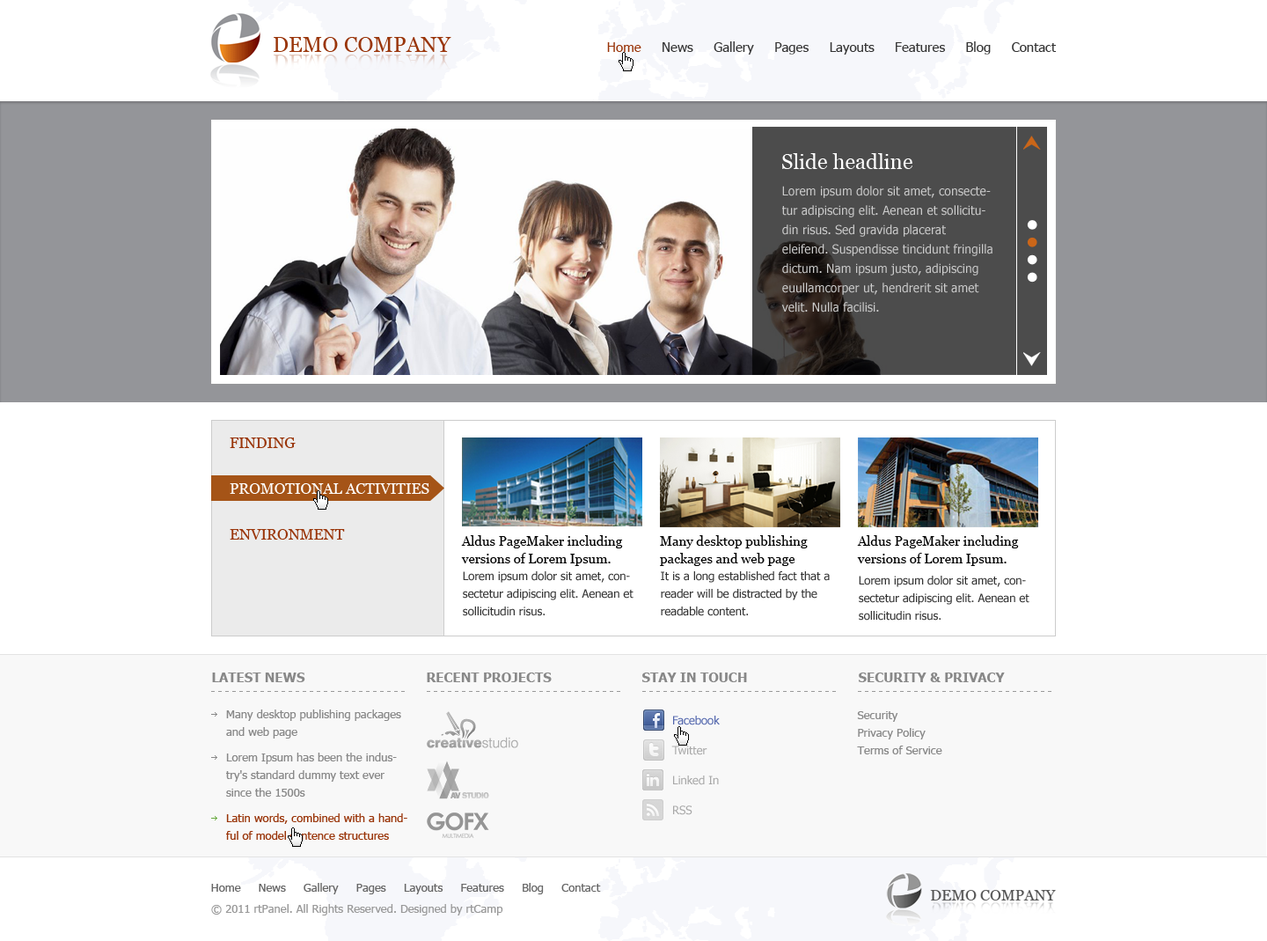
<style>
.page{position:relative;width:1267px;height:941px;background:#ffffff}
.page>*{position:absolute;margin:0}
.t1{font:21.1px "Georgia";letter-spacing:0.01em;color:#993408;text-transform:uppercase}
.t2{font:13.2px "Tahoma";color:#333333}
.t3{font:13.2px "Tahoma";color:#993408}
.t4{font:21.1px "Georgia";color:#fefefe}
.t5{font:12.3px/19.4px "Tahoma";color:#cccccc}
.t6{font:15px "Georgia";color:#993408;text-transform:uppercase}
.t7{font:15px "Georgia";color:#ffffff;text-transform:uppercase}
.t8{font:13.2px/17.6px "Georgia";color:#000000}
.t9{font:11.4px/17.6px "Tahoma";color:#333333}
.t10{font:13.2px "Tahoma-Bold";color:#888888;text-transform:uppercase}
.t11{font:13.2px "Tahoma";letter-spacing:0.2em;color:#999999}
.t12{font:11.4px/17.6px "Tahoma";color:#888888}
.t13{font:11.4px "Tahoma";color:#5266ad}
.t14{font:11.4px "Tahoma";color:#a8a8a8}
.t15{font:11.4px/17.6px "Tahoma";color:#993408}
.t16{font:11.4px "Tahoma";color:#666666}
.t17{font:11.4px "Tahoma";color:#999999}
</style>
<div class="page">
<p class="t1" style="left:274px;top:37px;width:178px;height:15px">Demo Company</p>
<p class="t2" style="left:607px;top:41px;width:450px;height:14px"><span class="t3">Home</span>     News     Gallery     Pages     Layouts     Features     Blog     Contact</p>
<p class="t4" style="left:782px;top:153px;width:131px;height:16px">Slide headline</p>
<p class="t5" style="left:782px;top:186px;width:211px;height:126px">Lorem ipsum dolor sit amet, consectetur adipiscing elit. Aenean et sollicitudin risus. Sed gravida placerat eleifend. Suspendisse tincidunt fringilla dictum. Nam ipsum justo, adipiscing euullamcorper ut, hendrerit sit amet velit. Nulla facilisi.</p>
<p class="t6" style="left:230px;top:437px;width:66px;height:11px">Finding</p>
<p class="t7" style="left:230px;top:483px;width:200px;height:11px">promotional activities</p>
<p class="t6" style="left:230px;top:529px;width:115px;height:11px">environment</p>
<p class="t8" style="left:461px;top:535px;width:162px;height:31px">Aldus PageMaker including versions of Lorem Ipsum.</p>
<p class="t8" style="left:660px;top:535px;width:148px;height:31px">Many desktop publishing packages and web page</p>
<p class="t8" style="left:857px;top:535px;width:162px;height:31px">Aldus PageMaker including versions of Lorem Ipsum.</p>
<p class="t9" style="left:463px;top:571px;width:171px;height:45px">Lorem ipsum dolor sit amet, consectetur adipiscing elit. Aenean et sollicitudin risus.</p>
<p class="t9" style="left:661px;top:571px;width:169px;height:45px">It is a long established fact that a reader will be distracted by the readable content.</p>
<p class="t9" style="left:859px;top:576px;width:171px;height:44px">Lorem ipsum dolor sit amet, consectetur adipiscing elit. Aenean et sollicitudin risus.</p>
<p class="t10" style="left:212px;top:672px;width:93px;height:10px">Latest News</p>
<p class="t10" style="left:427px;top:672px;width:125px;height:10px">Recent Projects</p>
<p class="t10" style="left:642px;top:672px;width:105px;height:10px">Stay in Touch</p>
<p class="t10" style="left:859px;top:672px;width:146px;height:10px">Security &amp; Privacy</p>
<p class="t11" style="left:211px;top:691px;width:194px;height:1px">-----------------------------------</p>
<p class="t11" style="left:427px;top:691px;width:193px;height:1px">-----------------------------------</p>
<p class="t11" style="left:642px;top:691px;width:194px;height:1px">-----------------------------------</p>
<p class="t11" style="left:858px;top:691px;width:194px;height:1px">-----------------------------------</p>
<p class="t12" style="left:226px;top:709px;width:175px;height:29px">Many desktop publishing packages and web page</p>
<p class="t12" style="left:857px;top:711px;width:86px;height:43px">Security<br>Privacy Policy<br>Terms of Service</p>
<p class="t13" style="left:673px;top:716px;width:47px;height:9px">Facebook</p>
<p class="t14" style="left:672px;top:745px;width:36px;height:10px">Twitter</p>
<p class="t12" style="left:226px;top:753px;width:171px;height:44px">Lorem Ipsum has been the industry's standard dummy text ever since the 1500s</p>
<p class="t14" style="left:673px;top:775px;width:46px;height:10px">Linked In</p>
<p class="t14" style="left:673px;top:805px;width:20px;height:10px">RSS</p>
<p class="t15" style="left:226px;top:813px;width:182px;height:27px">Latin words, combined with a handful of model sentence structures</p>
<p class="t16" style="left:211px;top:883px;width:390px;height:11px">Home     News     Gallery     Pages     Layouts     Features     Blog     Contact</p>
<p class="t17" style="left:211px;top:904px;width:292px;height:11px">© 2011 rtPanel. All Rights Reserved. Designed by rtCamp</p>
</div>
